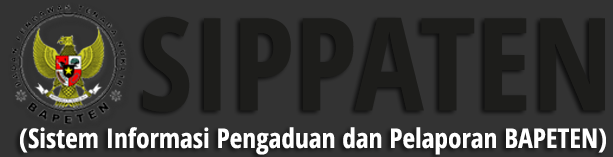
<style>
.page{position:relative;width:613px;height:157px;background:#333333}
.page>*{position:absolute;margin:0}
.t1{font:129.2px "OpenSans-CondensedBold";letter-spacing:0.005em;color:#1d1d1b}
.t2{font:27.1px "OpenSans-CondensedBold";letter-spacing:0.005em;color:#ffffff}
</style>
<div class="page">
<p class="t1" style="left:143px;top:16px;width:462px;height:96px">SIPPATEN</p>
<p class="t2" style="left:20px;top:127px;width:586px;height:28px">(Sistem Informasi Pengaduan dan Pelaporan BAPETEN)</p>
</div>
